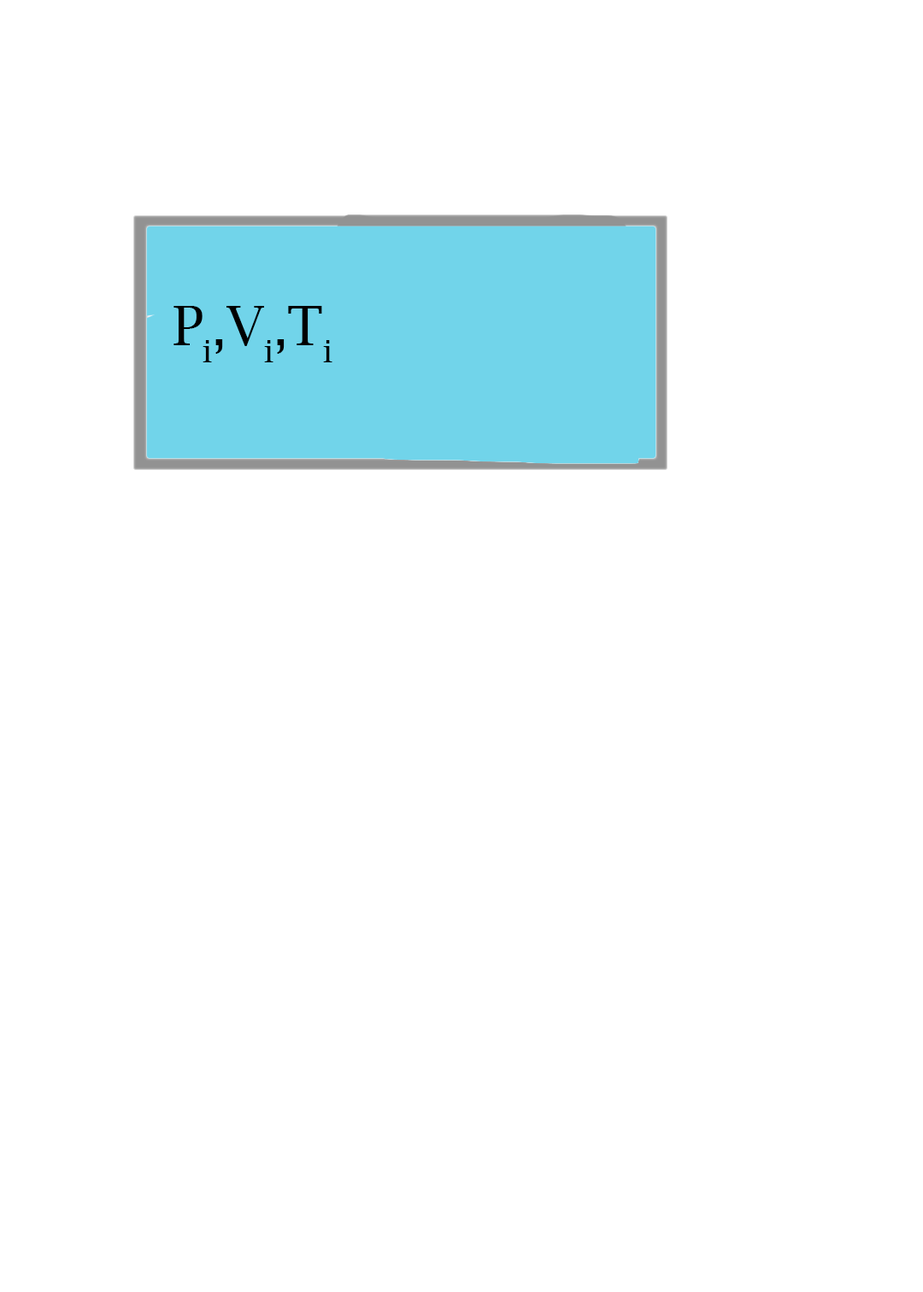
<style>
.page{position:relative;width:923px;height:1292px;background:#ffffff}
.page>*{position:absolute;margin:0}
.t1{font:53.4px "LucidaBright";color:#000000}
</style>
<div class="page">
<p class="t1" style="left:173px;top:306px;width:159px;height:56px">Pi,Vi,Ti</p>
</div>
